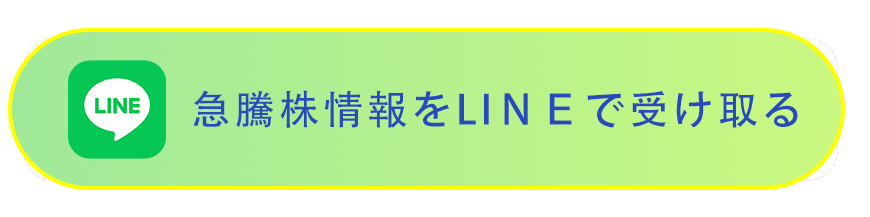
<style>
.page{position:relative;width:870px;height:217px;background:#ffffff}
.page>*{position:absolute;margin:0}
.t1{font:40.3px "AdobeHeitiStd-Regular";letter-spacing:0.1em;color:#274abc}
</style>
<div class="page">
<p class="t1" style="left:193px;top:90px;width:605px;height:38px">急騰株情報をLIＮＥで受け取る</p>
</div>
